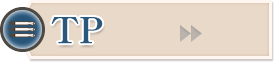
<style>
.page{position:relative;width:274px;height:66px;background:#e8d9c9}
.page>*{position:absolute;margin:0}
.t1{font:36px "RyuminPro-ExBold";color:#2a577c}
</style>
<div class="page">
<p class="t1" style="left:51px;top:17px;width:52px;height:27px">TP</p>
</div>
